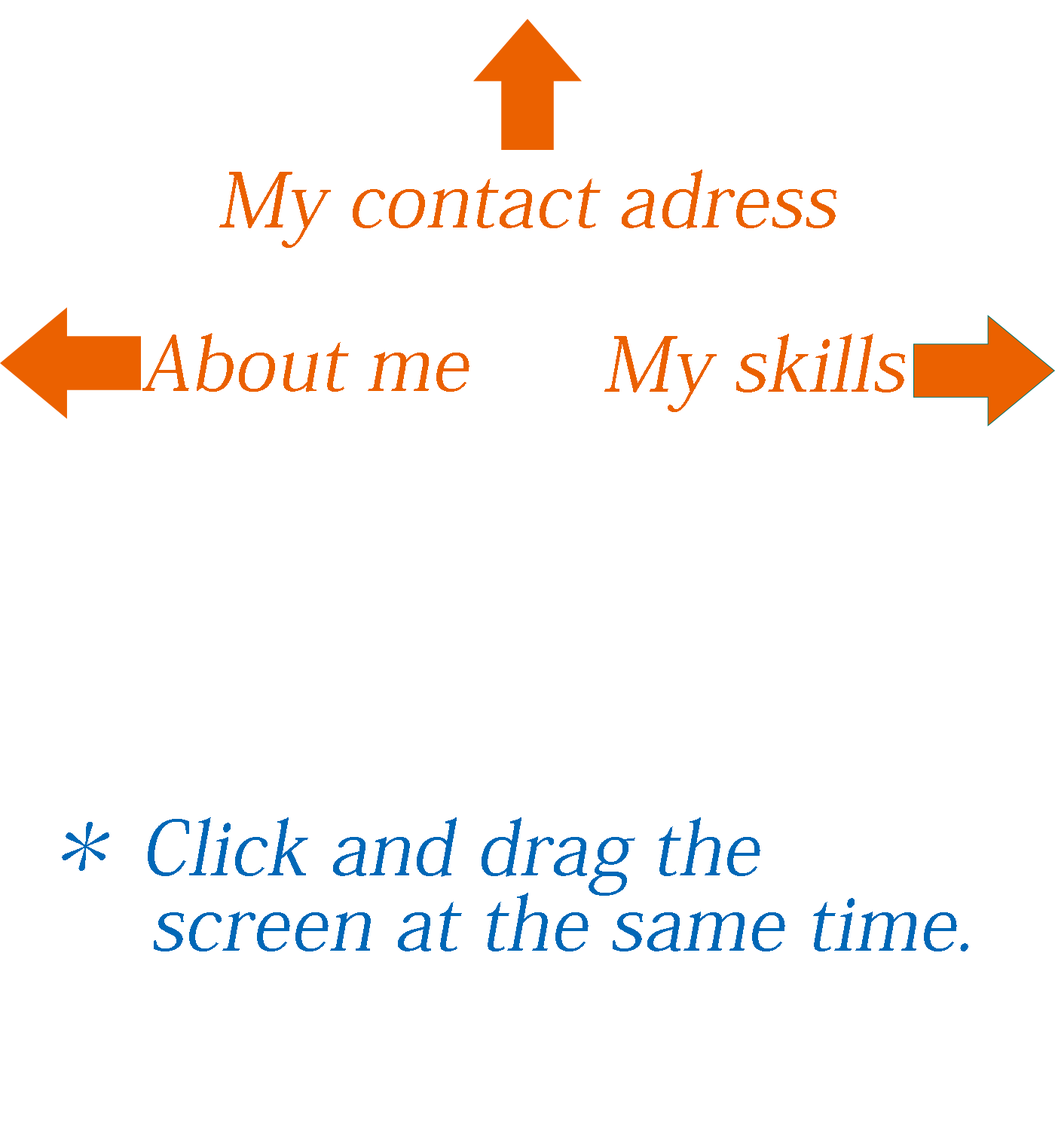
<style>
.page{position:relative;width:1055px;height:1130px;background:#ffffff}
.page>*{position:absolute;margin:0}
.t1{font:75.4px "KozMinPr6N-Regular";letter-spacing:0.005em;color:#eb6100;font-style:italic}
.t2{font:75.4px/75.4px "KozMinPr6N-Regular";letter-spacing:0.005em;color:#0068b7;font-style:italic}
</style>
<div class="page">
<p class="t1" style="left:219px;top:170px;width:617px;height:78px">My contact adress</p>
<p class="t1" style="left:142px;top:333px;width:327px;height:59px">About me</p>
<p class="t1" style="left:604px;top:334px;width:301px;height:78px">My skills</p>
<p class="t2" style="left:62px;top:818px;width:906px;height:134px">＊ Click and drag the <br>     screen at the same time.</p>
</div>
